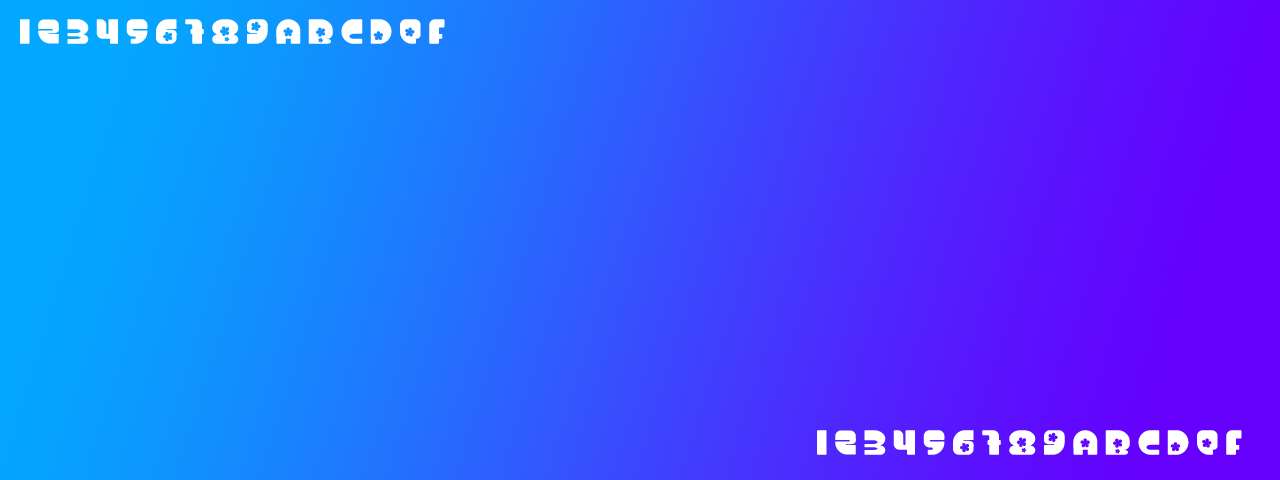
<style>
.page{position:relative;width:1280px;height:480px}
.page>*{position:absolute;margin:0}
.t1{font:48px "Chick";color:#ffffff}
</style>
<div class="page">
<p class="t1" style="left:20px;top:19px;width:425px;height:25px">1 2 3 4 5 6 7 8 9 A B C D E F</p>
<p class="t1" style="left:817px;top:430px;width:425px;height:25px">1 2 3 4 5 6 7 8 9 A B C D E F</p>
</div>
